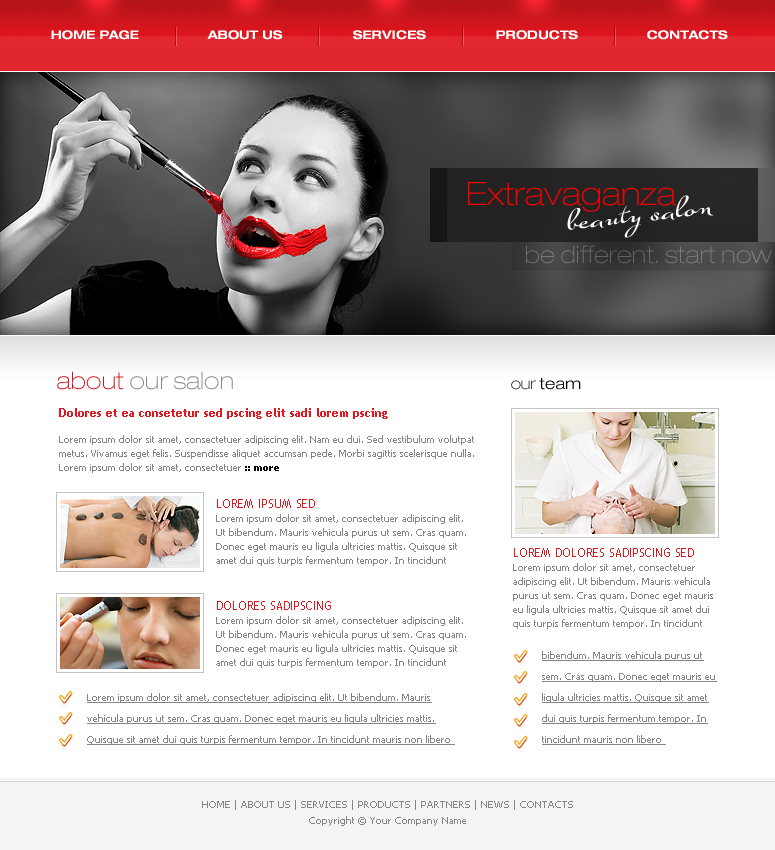
<style>
.page{position:relative;width:775px;height:850px;background:#ffffff}
.page>*{position:absolute;margin:0}
.t1{font:12px "HelveticaNeueLTPro-BdEx";color:#ffffff}
.t2{font:32.2px "HelveticaNeueLTPro-ThEx";color:#f80000}
.t3{font:32.2px "SuaveScriptAlt-Bold";color:#ffffff}
.t4{font:24px "HelveticaNeueLTPro-ThEx";color:#717171}
.t5{font:24px "HelveticaNeueLTPro-ThEx";color:#858585}
.t6{font:24px "HelveticaNeueLTPro-ThEx";color:#cf151c}
.t7{font:16px "HelveticaNeueLTPro-LtEx";color:#000000}
.t8{font:16px "HelveticaNeueLTPro-ThEx";color:#000000}
.t9{font:10px/14px "Tahoma";color:#858585}
.t10{font:12px/12px "TrebuchetMS-Bold";color:#e3151d}
.t11{font:10px/14px "Tahoma-Bold";color:#000000}
.t12{font:12px/12px "TrebuchetMS";color:#e3151d;text-transform:uppercase}
.t13{font:10px/21px "Tahoma";color:#858585;text-decoration:underline}
.t14{font:10px/16px "Tahoma";color:#858585}
</style>
<div class="page">
<p class="t1" style="left:51px;top:30px;width:88px;height:10px">HOME PAGE</p>
<p class="t1" style="left:207px;top:30px;width:76px;height:10px">ABOUT US</p>
<p class="t1" style="left:353px;top:30px;width:73px;height:10px">SERVICES</p>
<p class="t1" style="left:496px;top:30px;width:82px;height:10px">PRODUCTS</p>
<p class="t1" style="left:647px;top:30px;width:81px;height:10px">CONTACTS</p>
<p class="t2" style="left:468px;top:182px;width:209px;height:30px">Extravaganza</p>
<p class="t3" style="left:567px;top:195px;width:147px;height:43px;rotate:-7deg">beauty salon</p>
<p class="t4" style="left:526px;top:245px;width:246px;height:19px">be different. start now</p>
<p class="t5" style="left:57px;top:371px;width:176px;height:19px"><span class="t6">about </span>our salon</p>
<p class="t7" style="left:511px;top:378px;width:70px;height:12px"><span class="t8">our </span>team</p>
<p class="t9" style="left:59px;top:408px;width:415px;height:65px"><span class="t10">Dolores et ea consetetur sed pscing elit sadi lorem pscing <br><br></span>Lorem ipsum dolor sit amet, consectetuer adipiscing elit. Nam eu dui. Sed vestibulum volutpat metus. Vivamus eget felis. Suspendisse aliquet accumsan pede. Morbi sagittis scelerisque nulla. Lorem ipsum dolor sit amet, consectetuer <span class="t11">:: more</span></p>
<p class="t9" style="left:216px;top:499px;width:250px;height:67px"><span class="t12">LOREM IPSUM sed <br></span>Lorem ipsum dolor sit amet, consectetuer adipiscing elit. Ut bibendum. Mauris vehicula purus ut sem. Cras quam. Donec eget mauris eu ligula ultricies mattis. Quisque sit amet dui quis turpis fermentum tempor. In tincidunt</p>
<p class="t9" style="left:513px;top:548px;width:200px;height:81px"><span class="t12">LOREM DOLORES SADIPSCING sed <br></span>Lorem ipsum dolor sit amet, consectetuer adipiscing elit. Ut bibendum. Mauris vehicula purus ut sem. Cras quam. Donec eget mauris eu ligula ultricies mattis. Quisque sit amet dui quis turpis fermentum tempor. In tincidunt</p>
<p class="t9" style="left:216px;top:601px;width:250px;height:67px"><span class="t12">DOLORES SADIPSCING<br></span>Lorem ipsum dolor sit amet, consectetuer adipiscing elit. Ut bibendum. Mauris vehicula purus ut sem. Cras quam. Donec eget mauris eu ligula ultricies mattis. Quisque sit amet dui quis turpis fermentum tempor. In tincidunt</p>
<p class="t13" style="left:542px;top:651px;width:175px;height:94px">bibendum. Mauris vehicula purus ut sem. Cras quam. Donec eget mauris eu ligula ultricies mattis. Quisque sit amet dui quis turpis fermentum tempor. In tincidunt mauris non libero</p>
<p class="t13" style="left:87px;top:693px;width:368px;height:52px">Lorem ipsum dolor sit amet, consectetuer adipiscing elit. Ut bibendum. Mauris vehicula purus ut sem. Cras quam. Donec eget mauris eu ligula ultricies mattis. Quisque sit amet dui quis turpis fermentum tempor. In tincidunt mauris non libero</p>
<p class="t14" style="left:202px;top:800px;width:371px;height:26px;text-align:center">HOME | ABOUT US | SERVICES | PRODUCTS | PARTNERS | NEWS | CONTACTS<br>Copyright © Your Company Name</p>
</div>
